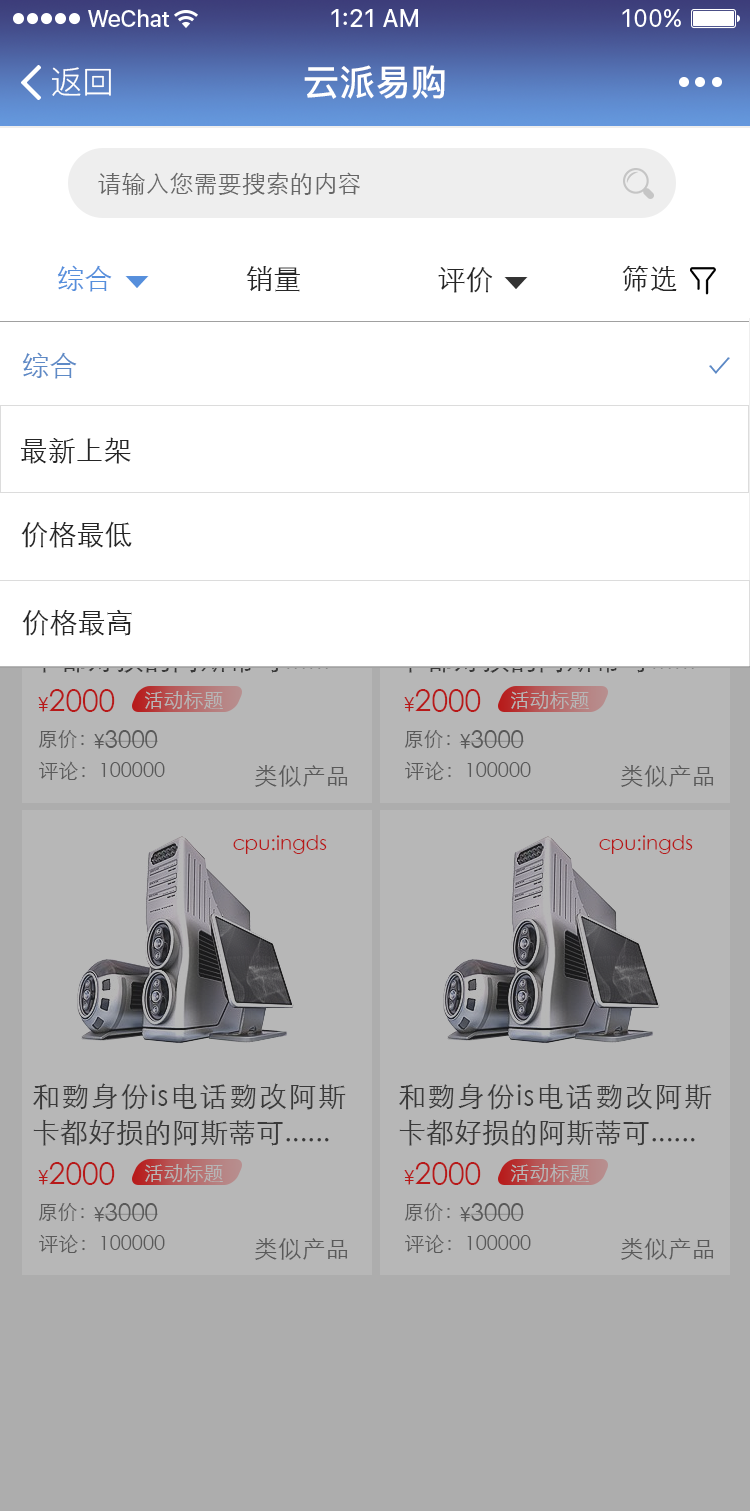
<style>
.page{position:relative;width:750px;height:1511px;background:#ffffff}
.page>*{position:absolute;margin:0}
.t1{font:36px "PingFang-SC-Bold";color:#ffffff}
.t2{font:32px "PingFang-SC-Regular";color:#ffffff}
.t3{font:24px "STXihei";color:#666666}
.t4{font:28px "STXihei";color:#568fdc}
.t5{font:28px "STXihei";color:#262626}
.t6{font:28px "STXihei";color:#5e8ac6}
.t7{font:28px "STXihei";color:#252525}
.t8{font:30px "STXihei";color:#b71919}
.t9{font:20px "STXihei";color:#b71919}
.t10{font:20px "STXihei";color:#b7b7b7}
.t11{font:20px "STXihei";color:#666666}
.t12{font:28px/36px "STXihei";color:#333333}
</style>
<div class="page">
<p class="t1" style="left:304px;top:65px;width:141px;height:34px">云派易购</p>
<p class="t2" style="left:52px;top:67px;width:59px;height:29px">返回</p>
<p class="t3" style="left:98px;top:172px;width:262px;height:23px">请输入您需要搜索的内容</p>
<p class="t4" style="left:57px;top:265px;width:55px;height:27px">综合</p>
<p class="t5" style="left:246px;top:266px;width:54px;height:26px">销量</p>
<p class="t5" style="left:438px;top:267px;width:55px;height:26px">评价</p>
<p class="t5" style="left:622px;top:265px;width:55px;height:27px">筛选</p>
<p class="t6" style="left:22px;top:352px;width:55px;height:27px">综合</p>
<p class="t7" style="left:20px;top:437px;width:111px;height:27px">最新上架</p>
<p class="t7" style="left:21px;top:521px;width:111px;height:27px">价格最低</p>
<p class="t7" style="left:22px;top:609px;width:110px;height:27px">价格最高</p>
<p class="t8" style="left:38px;top:689px;width:77px;height:23px"><span class="t9">¥</span>2000</p>
<p class="t8" style="left:404px;top:689px;width:77px;height:23px"><span class="t9">¥</span>2000</p>
<p class="t10" style="left:145px;top:691px;width:78px;height:19px">活动标题</p>
<p class="t10" style="left:511px;top:691px;width:78px;height:19px">活动标题</p>
<p class="t11" style="left:38px;top:730px;width:46px;height:19px">原价：</p>
<p class="t3" style="left:93px;top:730px;width:65px;height:19px"><span class="t11">¥</span>3000</p>
<p class="t11" style="left:404px;top:730px;width:46px;height:19px">原价：</p>
<p class="t3" style="left:459px;top:730px;width:65px;height:19px"><span class="t11">¥</span>3000</p>
<p class="t11" style="left:39px;top:761px;width:126px;height:19px">评论：100000</p>
<p class="t11" style="left:405px;top:761px;width:126px;height:19px">评论：100000</p>
<p class="t3" style="left:255px;top:765px;width:93px;height:22px">类似产品</p>
<p class="t3" style="left:621px;top:765px;width:93px;height:22px">类似产品</p>
<p class="t9" style="left:233px;top:835px;width:94px;height:19px">cpu:ingds</p>
<p class="t9" style="left:599px;top:835px;width:94px;height:19px">cpu:ingds</p>
<p class="t12" style="left:33px;top:1083px;width:313px;height:63px;text-align:justify">和覅身份is电话覅改阿斯卡都好损的阿斯蒂可......</p>
<p class="t12" style="left:399px;top:1083px;width:313px;height:63px;text-align:justify">和覅身份is电话覅改阿斯卡都好损的阿斯蒂可......</p>
<p class="t8" style="left:38px;top:1162px;width:77px;height:23px"><span class="t9">¥</span>2000</p>
<p class="t10" style="left:145px;top:1164px;width:78px;height:19px">活动标题</p>
<p class="t8" style="left:404px;top:1162px;width:77px;height:23px"><span class="t9">¥</span>2000</p>
<p class="t10" style="left:511px;top:1164px;width:78px;height:19px">活动标题</p>
<p class="t11" style="left:38px;top:1203px;width:46px;height:19px">原价：</p>
<p class="t3" style="left:93px;top:1203px;width:65px;height:19px"><span class="t11">¥</span>3000</p>
<p class="t11" style="left:404px;top:1203px;width:46px;height:19px">原价：</p>
<p class="t3" style="left:459px;top:1203px;width:65px;height:19px"><span class="t11">¥</span>3000</p>
<p class="t11" style="left:39px;top:1234px;width:126px;height:19px">评论：100000</p>
<p class="t3" style="left:255px;top:1238px;width:93px;height:22px">类似产品</p>
<p class="t11" style="left:405px;top:1234px;width:126px;height:19px">评论：100000</p>
<p class="t3" style="left:621px;top:1238px;width:93px;height:22px">类似产品</p>
</div>
